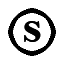
<style>
.page{position:relative;width:64px;height:64px;background:#ffffff}
.page>*{position:absolute;margin:0}
.t1{font:49.4px "BellMTBold";color:#000000}
</style>
<div class="page">
<p class="t1" style="left:24px;top:21px;width:17px;height:21px">s</p>
</div>
